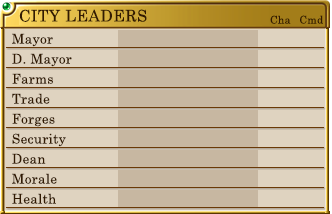
<style>
.page{position:relative;width:332px;height:214px;background:#dfd3c0}
.page>*{position:absolute;margin:0}
.t1{font:16px "CenturySchoolbook";letter-spacing:0.025em;color:#321a02}
.t2{font:10.7px "CenturySchoolbook";letter-spacing:0.025em;color:#321a02}
.t3{font:13.3px "CenturySchoolbook";letter-spacing:0.025em;color:#321a02}
</style>
<div class="page">
<p class="t1" style="left:19px;top:9px;width:128px;height:13px">CITY LEADERS</p>
<p class="t2" style="left:270px;top:15px;width:21px;height:9px">Cha</p>
<p class="t2" style="left:300px;top:15px;width:23px;height:9px">Cmd</p>
<p class="t3" style="left:12px;top:33px;width:41px;height:14px">Mayor</p>
<p class="t3" style="left:12px;top:53px;width:60px;height:14px">D. Mayor</p>
<p class="t3" style="left:12px;top:73px;width:41px;height:11px">Farms</p>
<p class="t3" style="left:12px;top:93px;width:38px;height:11px">Trade</p>
<p class="t3" style="left:12px;top:113px;width:43px;height:14px">Forges</p>
<p class="t3" style="left:12px;top:133px;width:54px;height:14px">Security</p>
<p class="t3" style="left:12px;top:153px;width:34px;height:11px">Dean</p>
<p class="t3" style="left:12px;top:173px;width:45px;height:11px">Morale</p>
<p class="t3" style="left:12px;top:193px;width:44px;height:11px">Health</p>
</div>
